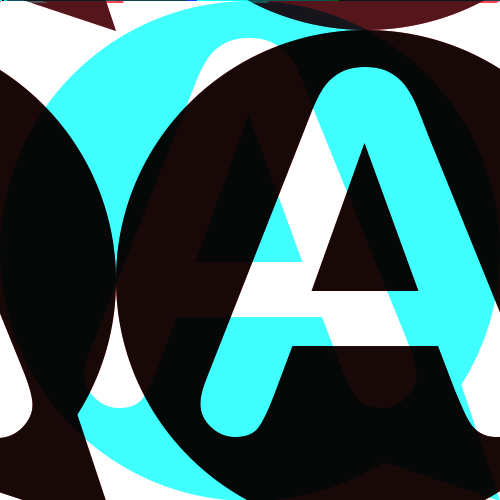
<style>
.page{position:relative;width:500px;height:500px;background:#060808}
.page>*{position:absolute;margin:0}
.t1{font:500px "ArialRoundedMTBold"}
</style>
<div class="page">
<p class="t1" style="left:84px;top:37px;width:333px;height:370px">A</p>
</div>
